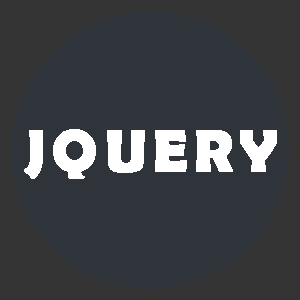
<style>
.page{position:relative;width:300px;height:300px;background:#2f343b}
.page>*{position:absolute;margin:0}
.t1{font:59.6px "BerlinSansFBDemi-Bold";letter-spacing:0.1em;color:#ffffff;text-transform:uppercase;font-weight:bold}
</style>
<div class="page">
<p class="t1" style="left:24px;top:129px;width:253px;height:50px">jquery</p>
</div>
